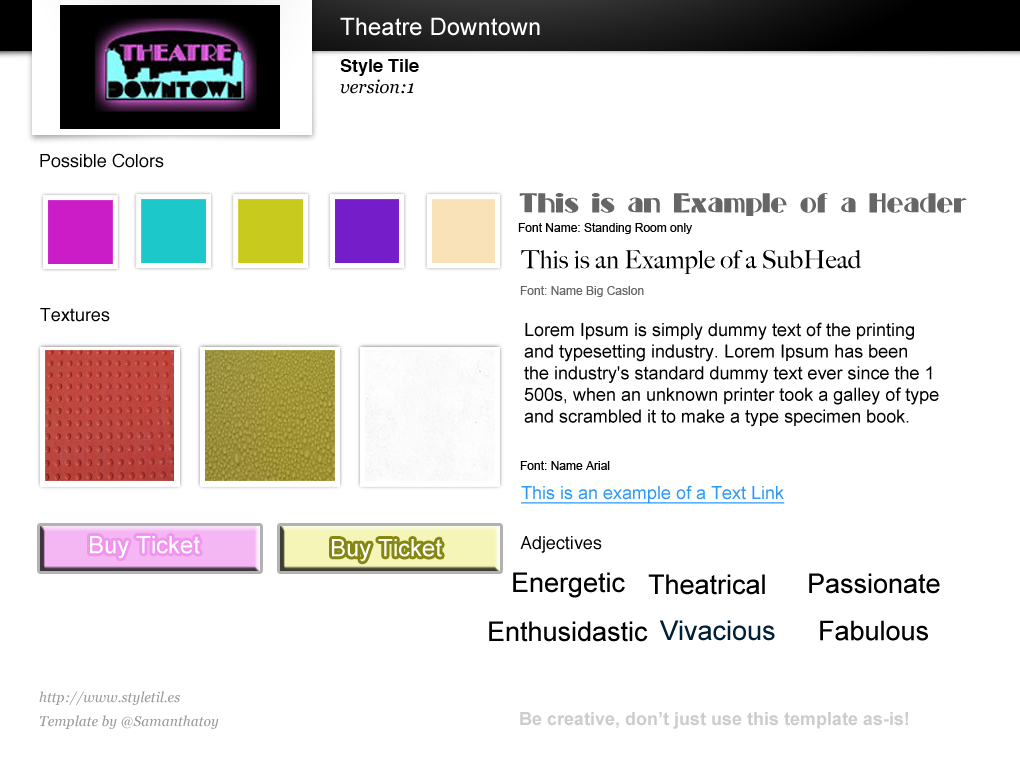
<style>
.page{position:relative;width:1020px;height:760px;background:#ffffff}
.page>*{position:absolute;margin:0}
.t1{font:24px "ArialMT";color:#ffffff}
.t2{font:12px "ArialMT";color:#000000}
.t3{font:32px "Arial-BoldMT";color:#000000}
.t4{font:25px "StandingRoomOnly";color:#666666}
.t5{font:25px "BigCaslon-Medium";color:#000000}
.t6{font:12px "ArialMT";color:#666666}
.t7{font:14px/24px "Georgia-Italic";color:#000000}
.t8{font:18px "ArialMT";color:#000000}
.t9{font:18px "ArialMT";color:#2b99f7;text-decoration:underline}
.t10{font:18px "Helvetica";color:#000000}
.t11{font:27px "ArialMT";color:#020202}
.t12{font:27px "ArialMT";color:#000000}
.t13{font:27px "ArialMT";color:#002035}
.t14{font:36px "ArialMT";color:#999999}
.t15{font:36px "ArialMT";color:#cccccc}
</style>
<div class="page">
<p class="t1" style="left:340px;top:17px;width:200px;height:19px">Theatre Downtown</p>
<p class="t2" style="left:340px;top:79px;width:74px;height:15px">Font: Name #hexcode</p>
<p class="t3" style="left:40px;top:153px;width:124px;height:15px">This is an Example of a Header</p>
<p class="t4" style="left:519px;top:193px;width:448px;height:23px">This is an Example of a Header</p>
<p class="t2" style="left:518px;top:223px;width:174px;height:11px">Font Name: Standing Room only</p>
<p class="t5" style="left:521px;top:250px;width:340px;height:24px">This is an Example of a SubHead</p>
<p class="t6" style="left:520px;top:286px;width:124px;height:11px">Font: Name Big Caslon</p>
<p class="t7" style="left:40px;top:308px;width:70px;height:14px">http://www.styletil.es<br>Template by @Samanthatoy</p>
<p class="t8" style="left:524px;top:322px;width:415px;height:105px">Lorem Ipsum is simply dummy text of the printing <br>and typesetting industry. Lorem Ipsum has been <br>the industry's standard dummy text ever since the 1<br>500s, when an unknown printer took a galley of type <br>and scrambled it to make a type specimen book.</p>
<p class="t2" style="left:520px;top:461px;width:90px;height:9px">Font: Name Arial</p>
<p class="t9" style="left:521px;top:485px;width:264px;height:19px">This is an example of a Text Link</p>
<p class="t1" style="left:90px;top:536px;width:110px;height:23px">Buy Ticket</p>
<p class="t1" style="left:332px;top:539px;width:110px;height:23px">Buy Ticket</p>
<p class="t10" style="left:520px;top:536px;width:82px;height:17px">Adjectives</p>
<p class="t11" style="left:513px;top:572px;width:112px;height:26px">Energetic</p>
<p class="t12" style="left:648px;top:574px;width:117px;height:21px">Theatrical</p>
<p class="t12" style="left:809px;top:573px;width:131px;height:21px">Passionate</p>
<p class="t12" style="left:489px;top:621px;width:159px;height:21px">Enthusidastic</p>
<p class="t13" style="left:659px;top:620px;width:116px;height:21px">Vivacious</p>
<p class="t12" style="left:820px;top:620px;width:108px;height:21px">Fabulous</p>
<p class="t14" style="left:39px;top:691px;width:180px;height:38px">Amet</p>
<p class="t15" style="left:520px;top:712px;width:388px;height:17px">Sit</p>
</div>
